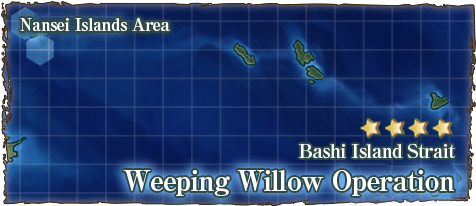
<style>
.page{position:relative;width:476px;height:206px}
.page>*{position:absolute;margin:0}
.t1{font:17px "RyuminPro-ExBold";letter-spacing:-0.04em;color:#ffffff}
.t2{font:19px "RyuminPro-ExBold";letter-spacing:-0.04em;color:#ffffff}
.t3{font:28px "RyuminPro-ExBold";letter-spacing:-0.04em;color:#ffffff}
</style>
<div class="page">
<p class="t1" style="left:20px;top:18px;width:150px;height:14px">Nansei Islands Area</p>
<p class="t2" style="left:299px;top:143px;width:156px;height:16px">Bashi Island Strait</p>
<p class="t3" style="left:123px;top:170px;width:331px;height:26px">Weeping Willow Operation</p>
</div>
